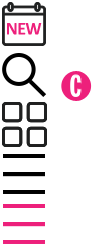
<style>
.page{position:relative;width:110px;height:250px;background:#ffffff}
.page>*{position:absolute;margin:0}
.t1{font:18px "Calibri-Bold";letter-spacing:-0.03em;color:#ed207b}
</style>
<div class="page">
<p class="t1" style="left:7px;top:23px;width:35px;height:12px">NEW</p>
</div>
